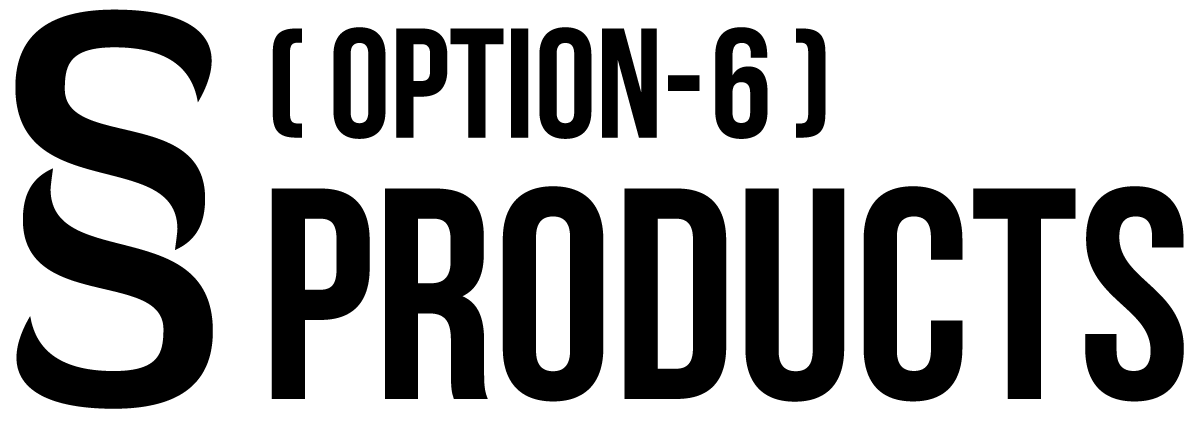
<style>
.page{position:relative;width:1200px;height:421px;background:#ffffff}
.page>*{position:absolute;margin:0}
.t1{font:400.3px "DiavloBold-Regular";color:#000000}
.t2{font:155.7px "BebasNeue";color:#000000}
.t3{font:300.2px "BebasNeue";color:#000000}
</style>
<div class="page">
<p class="t1" style="left:15px;top:9px;width:198px;height:400px">§</p>
<p class="t2" style="left:272px;top:27px;width:428px;height:112px">( option-</p>
<p class="t2" style="left:715px;top:27px;width:53px;height:112px">6</p>
<p class="t2" style="left:796px;top:28px;width:30px;height:110px">)</p>
<p class="t3" style="left:271px;top:186px;width:913px;height:216px">Products</p>
</div>
